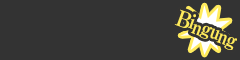
<style>
.page{position:relative;width:240px;height:60px;background:#333333}
.page>*{position:absolute;margin:0}
.t1{font:19.8px "RyuminPro-ExBold";letter-spacing:-0.08em;color:#ffeb5c;scale:0.9 1}
.t2{font:22px "RyuminPro-ExBold";letter-spacing:-0.08em;color:#ffeb5c;scale:0.9 1}
</style>
<div class="page">
<p class="t1" style="left:174px;top:9px;width:63px;height:41px;rotate:20deg"><span class="t2">B</span>ingung</p>
</div>
